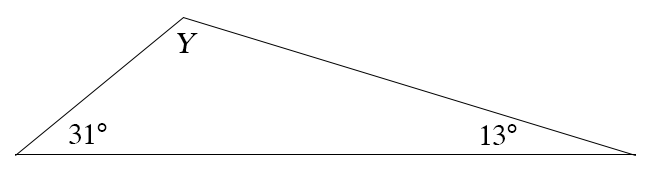
<style>
.page{position:relative;width:652px;height:172px;background:#ffffff}
.page>*{position:absolute;margin:0}
.t1{font:30px "Times-Roman";letter-spacing:-0.02em;color:#000000;font-style:italic}
.t2{font:30px "Times-Roman";letter-spacing:-0.02em;color:#000000}
</style>
<div class="page">
<p class="t1" style="left:177px;top:33px;width:21px;height:20px">Y</p>
<p class="t2" style="left:69px;top:123px;width:38px;height:21px">31°</p>
<p class="t2" style="left:481px;top:124px;width:36px;height:21px">13°</p>
</div>
